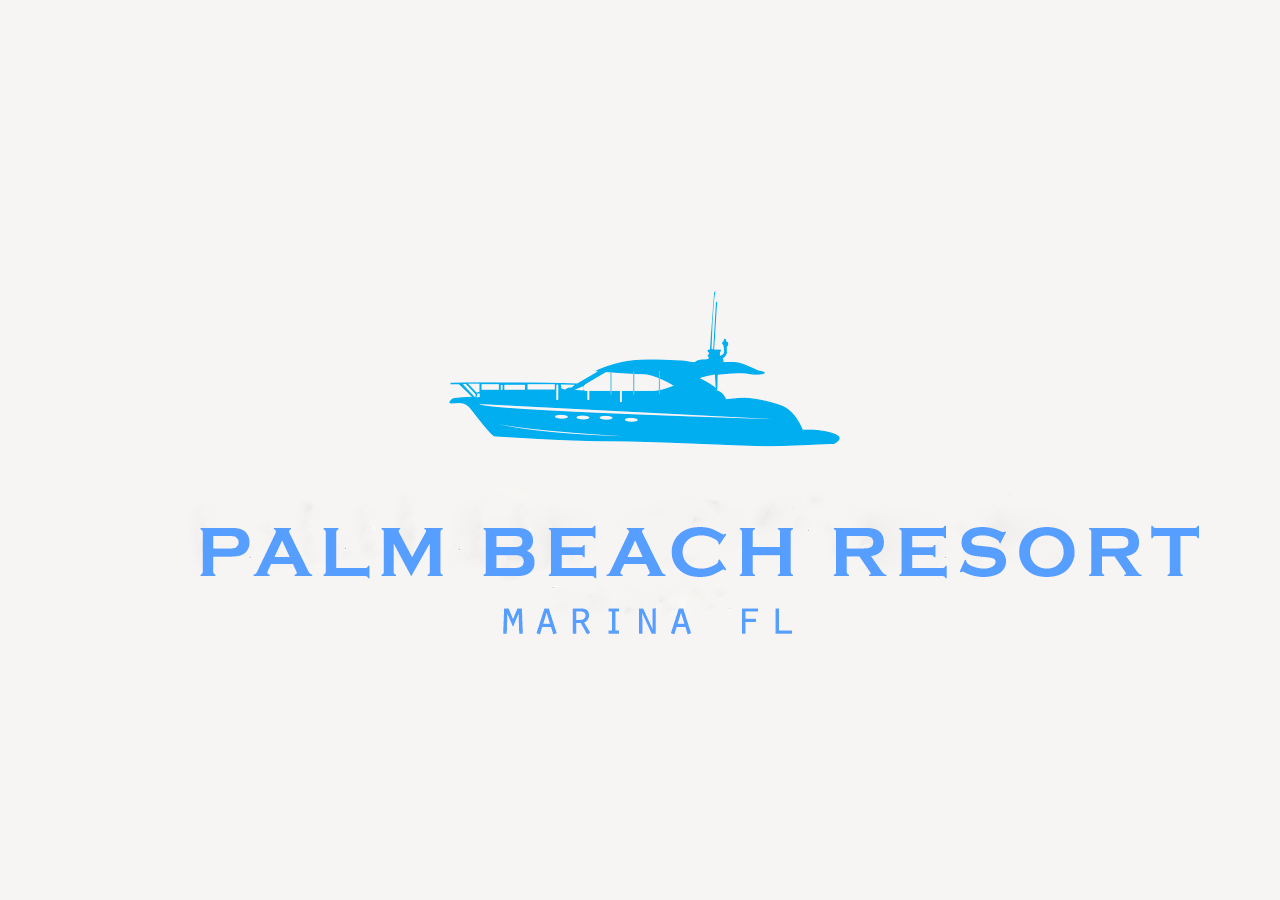
<style>
.page{position:relative;width:1280px;height:900px;background:#f6f5f3}
.page>*{position:absolute;margin:0}
.t1{font:72px "CopperplateGothic-Bold";letter-spacing:0.1em;color:#569eff}
.t2{font:48px "OratorStd";letter-spacing:0.1em;color:#569eff}
</style>
<div class="page">
<p class="t1" style="left:200px;top:525px;width:999px;height:110px">PALM BEACH RESORT<br><span class="t2">         marina fl</span></p>
</div>
